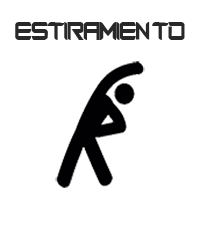
<style>
.page{position:relative;width:200px;height:250px;background:#ffffff}
.page>*{position:absolute;margin:0}
.t1{font:21.8px "Amazing-Spider-Man";color:#282828;scale:0.93 1}
</style>
<div class="page">
<p class="t1" style="left:15px;top:22px;width:170px;height:18px">ESTIRAMIENTO</p>
</div>
